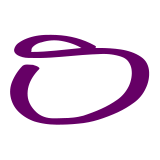
<style>
.page{position:relative;width:160px;height:160px;background:#ffffff}
.page>*{position:absolute;margin:0}
.t1{font:220px "MainstreamPERSONALUSEONLY";letter-spacing:-0.01em;color:#660066}
</style>
<div class="page">
<p class="t1" style="left:10px;top:34px;width:140px;height:91px">s</p>
</div>
